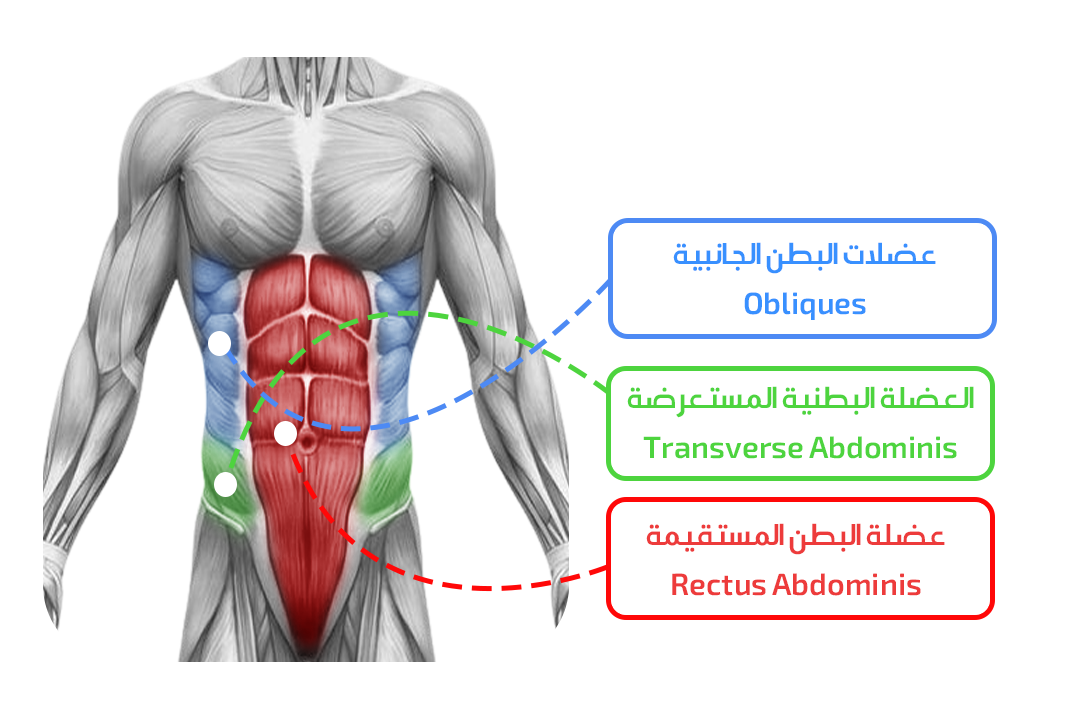
<style>
.page{position:relative;width:1080px;height:720px;background:#ffffff}
.page>*{position:absolute;margin:0}
.t1{font:41.7px "AraHamahKilania-Regular";color:#3890ff}
.t2{font:41.7px "AraHamahKilania-Regular";color:#4dd43e}
.t3{font:41.7px "AraHamahKilania-Regular";color:#ed3b3b}
</style>
<div class="page">
<p class="t1" style="left:673px;top:242px;width:263px;height:78px;text-align:center">عضلات البطن الجانبية<br>Obliques</p>
<p class="t2" style="left:627px;top:386px;width:347px;height:73px;text-align:center">العضلة البطنية المستعرضة<br>Transverse Abdominis</p>
<p class="t3" style="left:646px;top:523px;width:299px;height:73px;text-align:center">عضلة البطن المستقيمة<br>Rectus Abdominis</p>
</div>
